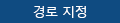
<style>
.page{position:relative;width:120px;height:23px;background:#0f4b81}
.page>*{position:absolute;margin:0}
.t1{font:12.5px "MalgunGothic";color:#ffffff}
</style>
<div class="page">
<p class="t1" style="left:33px;top:6px;width:54px;height:12px">경로 지정</p>
</div>
